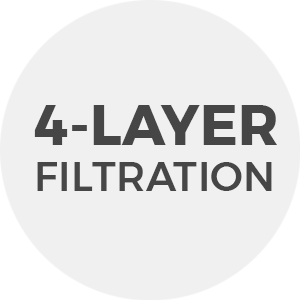
<style>
.page{position:relative;width:300px;height:300px;background:#f0f0f0}
.page>*{position:absolute;margin:0}
.t1{font:56px "Montserrat-Bold";letter-spacing:0.005em;color:#464646}
.t2{font:40.5px "Montserrat-Medium";letter-spacing:0.005em;color:#464646}
</style>
<div class="page">
<p class="t1" style="left:34px;top:105px;width:243px;height:40px">4-LAYER</p>
<p class="t2" style="left:37px;top:162px;width:235px;height:29px">FILTRATION</p>
</div>
